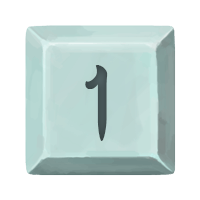
<style>
.page{position:relative;width:200px;height:200px;background:#ffffff}
.page>*{position:absolute;margin:0}
.t1{font:90px "Untitled";letter-spacing:-0.1em;color:#556769}
</style>
<div class="page">
<p class="t1" style="left:85px;top:65px;width:23px;height:76px">1</p>
</div>
